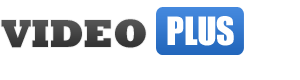
<style>
.page{position:relative;width:300px;height:80px;background:#ffffff}
.page>*{position:absolute;margin:0}
.t1{font:36px "Impact";letter-spacing:-0.01em;color:#ffffff}
.t2{font:40px "Rockwell-ExtraBold";letter-spacing:-0.01em;color:#333333}
</style>
<div class="page">
<p class="t1" style="left:167px;top:16px;width:67px;height:30px">PLUS</p>
<p class="t2" style="left:1px;top:19px;width:145px;height:29px">VIDEO</p>
</div>
